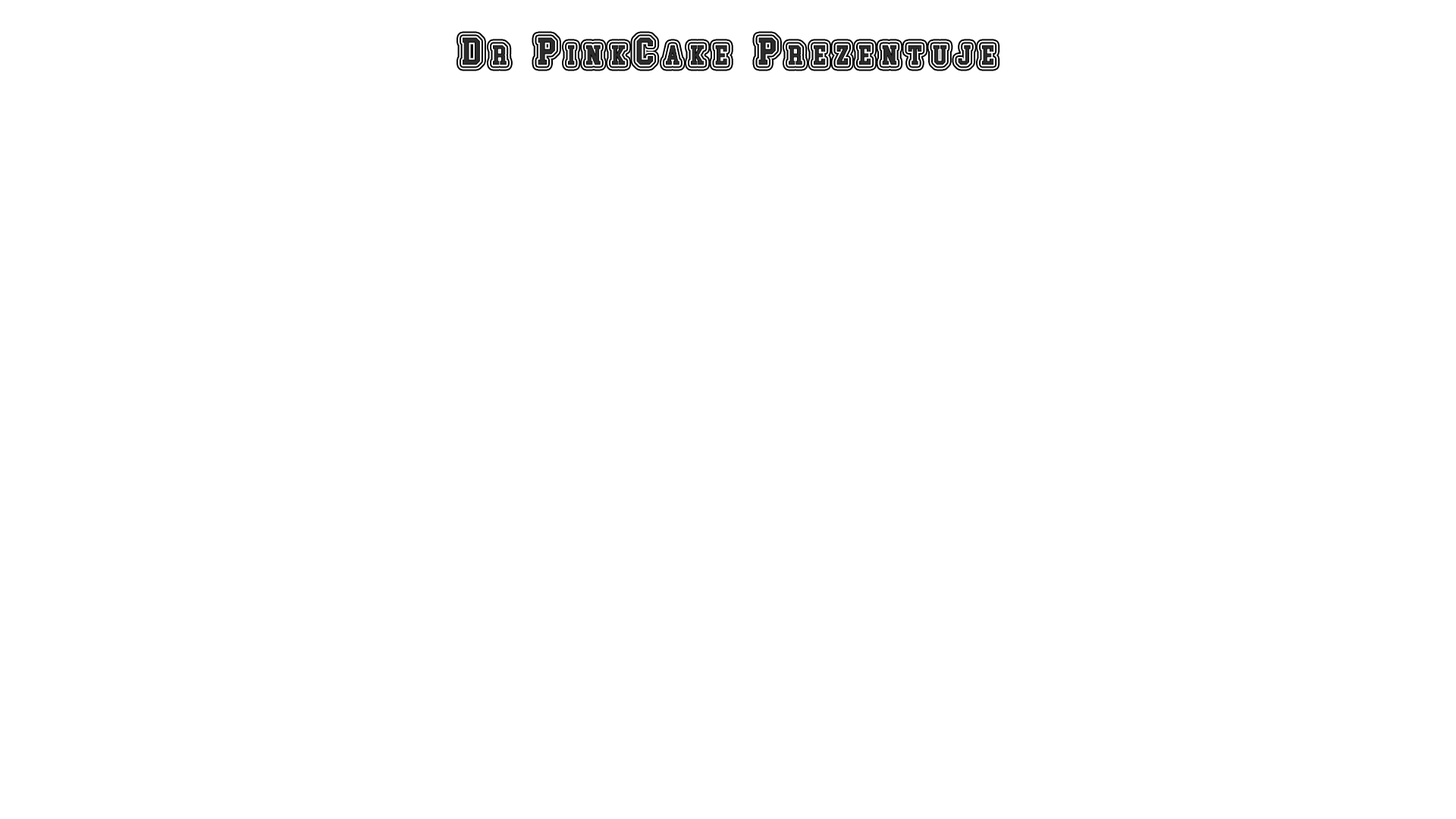
<style>
.page{position:relative;width:1456px;height:819px;background:#ffffff}
.page>*{position:absolute;margin:0}
.t1{font:34.1px "CollegeBlock2.0";letter-spacing:0.45em;color:#2d2d2d;font-variant:small-caps}
.t2{font:34.1px "CollegeBlock2.0";letter-spacing:0.325em;color:#2d2d2d;font-variant:small-caps}
</style>
<div class="page">
<p class="t1" style="left:463px;top:37px;width:531px;height:28px"><span class="t2">D</span>r <span class="t2">P</span>ink<span class="t2">C</span>ake <span class="t2">P</span>rezentuje</p>
</div>
